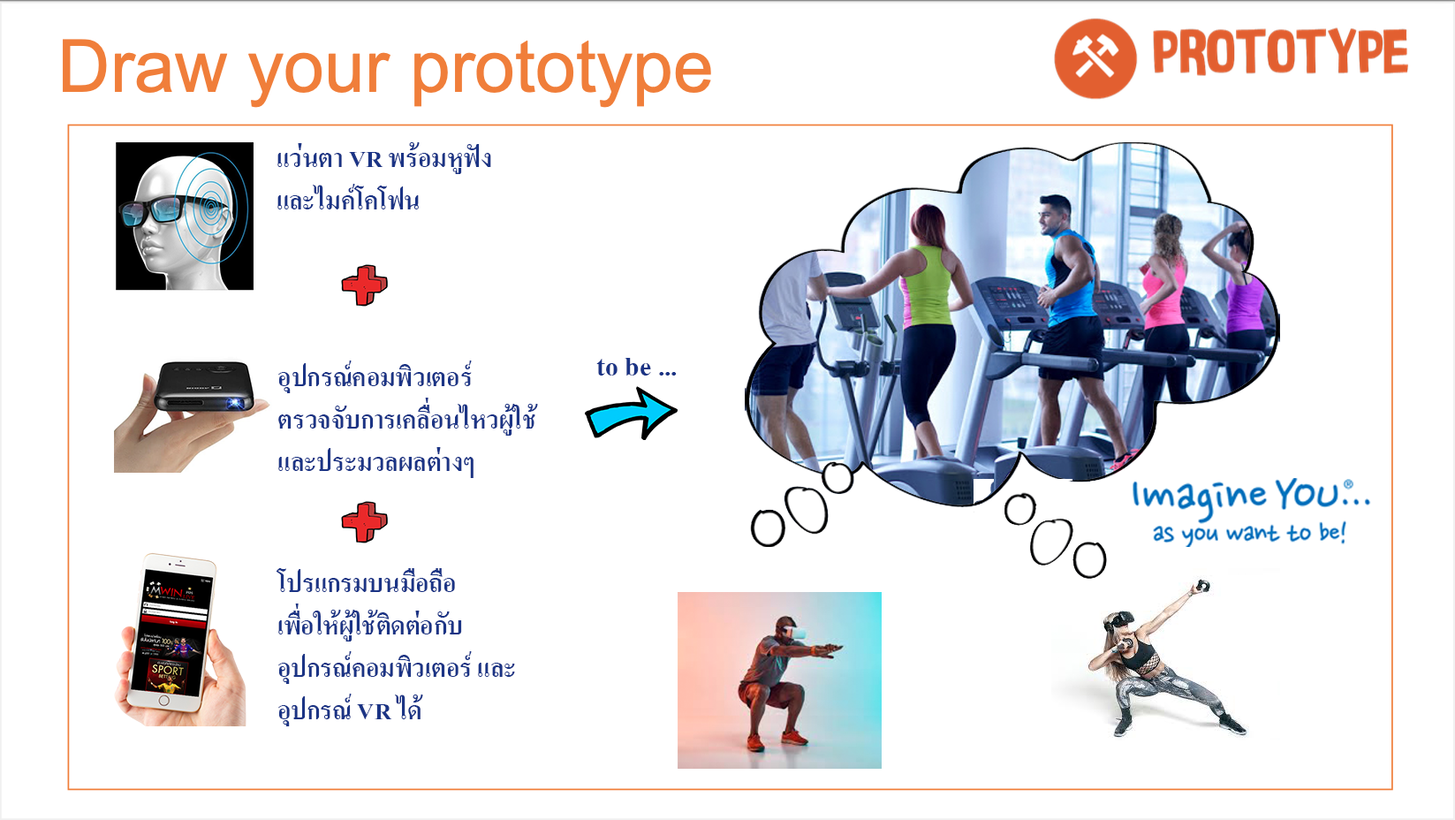
<style>
.page{position:relative;width:1455px;height:820px;background:#ffffff}
.page>*{position:absolute;margin:0}
.t1{font:35.3px "AngsanaUPC-Bold";color:#1b3485}
.t2{font:39.7px "AngsanaUPC-Bold";color:#1b3485}
</style>
<div class="page">
<p class="t1" style="left:277px;top:142px;width:214px;height:67px">แว่นตา VR พร้อมหูฟัง<br>และไมค์โคโฟน</p>
<p class="t1" style="left:278px;top:360px;width:260px;height:118px">อุปกรณ์คอมพิวเตอร์<br>ตรวจจับการเคลื่อนไหวผู้ใช้<br>และประมวลผลต่างๆ</p>
<p class="t2" style="left:596px;top:358px;width:81px;height:17px">to be ...</p>
<p class="t1" style="left:276px;top:568px;width:239px;height:158px">โปรแกรมบนมือถือ<br>เพื่อให้ผู้ใช้ติดต่อกับ<br>อุปกรณ์คอมพิวเตอร์ และ<br>อุปกรณ์ VR ได้</p>
</div>
